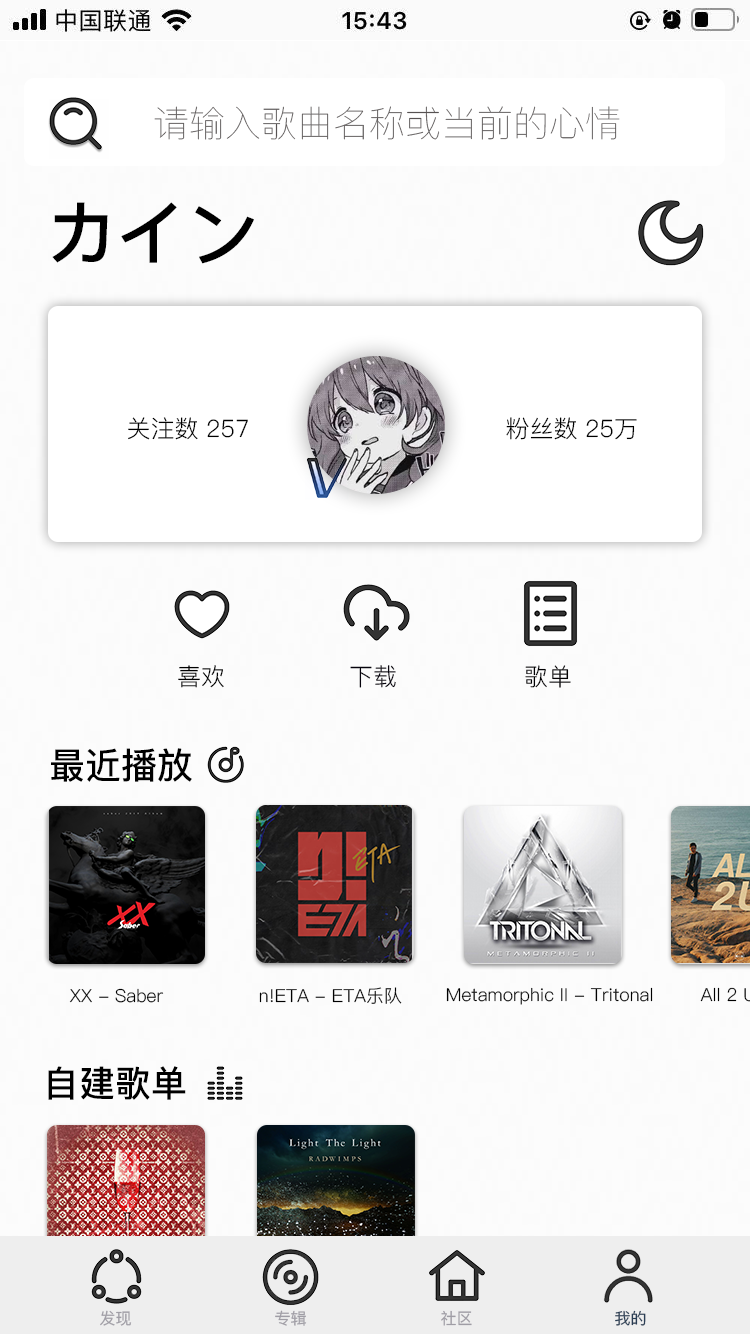
<style>
.page{position:relative;width:750px;height:1334px;background:#fcfcfc}
.page>*{position:absolute;margin:0}
.t1{font:36px "PingFang-SC-ExtraLight";color:#575252}
.t2{font:72px "PingFang-SC-Bold";color:#000000}
.t3{font:24px "PingFang-SC-Regular";color:#000000}
.t4{font:24px "PingFang-SC-Regular";color:#06030d}
.t5{font:24px "PingFang-SC-Regular";color:#010002}
.t6{font:36px "PingFang-SC-Bold";color:#000000}
.t7{font:18px "PingFang-SC-Regular";color:#000000}
.t8{font:16px "PingFang-SC-Medium";color:#9f9da5}
.t9{font:16px "PingFang-SC-Medium";color:#2a3e55}
</style>
<div class="page">
<p class="t1" style="left:154px;top:106px;width:466px;height:34px">请输入歌曲名称或当前的心情</p>
<p class="t2" style="left:52px;top:202px;width:202px;height:62px">カイン</p>
<p class="t3" style="left:128px;top:417px;width:120px;height:23px">关注数 257</p>
<p class="t3" style="left:506px;top:417px;width:131px;height:23px">粉丝数 25万</p>
<p class="t3" style="left:178px;top:665px;width:46px;height:23px">喜欢</p>
<p class="t4" style="left:350px;top:665px;width:46px;height:23px">下载</p>
<p class="t5" style="left:525px;top:665px;width:46px;height:23px">歌单</p>
<p class="t6" style="left:51px;top:748px;width:141px;height:34px">最近播放</p>
<p class="t7" style="left:69px;top:988px;width:95px;height:15px">XX - Saber</p>
<p class="t7" style="left:259px;top:987px;width:143px;height:17px">n!ETA - ETA乐队</p>
<p class="t7" style="left:446px;top:987px;width:207px;height:18px">Metamorphic II - Tritonal</p>
<p class="t6" style="left:48px;top:1066px;width:138px;height:34px">自建歌单</p>
<p class="t8" style="left:100px;top:1310px;width:32px;height:16px">发现</p>
<p class="t8" style="left:275px;top:1310px;width:32px;height:16px">专辑</p>
<p class="t8" style="left:441px;top:1310px;width:31px;height:16px">社区</p>
<p class="t9" style="left:615px;top:1310px;width:31px;height:16px">我的</p>
</div>
